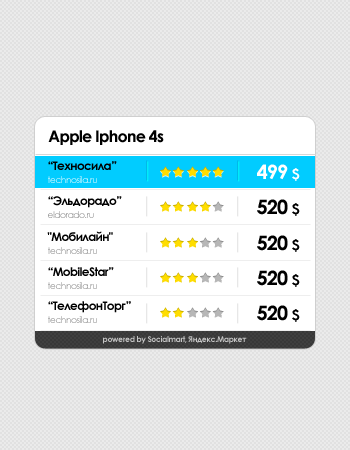
<style>
.page{position:relative;width:350px;height:450px;background:#e1e1e1}
.page>*{position:absolute;margin:0}
.t1{font:16px "CenturyGothic-Bold";letter-spacing:-0.05em;color:#000000}
.t2{font:12px "CenturyGothic-Bold";letter-spacing:-0.05em;color:#000000}
.t3{font:20px "CenturyGothic-Bold";letter-spacing:-0.05em;color:#ffffff}
.t4{font:14px "CenturyGothic-Bold";letter-spacing:-0.05em;color:#ffffff}
.t5{font:9px "CenturyGothic";letter-spacing:-0.05em}
.t6{font:20px "CenturyGothic-Bold";letter-spacing:-0.05em;color:#000000}
.t7{font:14px "CenturyGothic-Bold";letter-spacing:-0.05em;color:#000000}
.t8{font:8px "CenturyGothic-Bold";letter-spacing:-0.05em;color:#c5c5c5}
</style>
<div class="page">
<p class="t1" style="left:48px;top:130px;width:116px;height:15px">Apple Iphone 4s</p>
<p class="t2" style="left:48px;top:161px;width:69px;height:9px">“Техносила”</p>
<p class="t3" style="left:257px;top:164px;width:43px;height:17px">499 <span class="t4">$</span></p>
<p class="t5" style="left:48px;top:176px;width:49px;height:7px">technosila.ru</p>
<p class="t2" style="left:48px;top:196px;width:74px;height:12px">“Эльдорадо”</p>
<p class="t6" style="left:257px;top:199px;width:43px;height:17px">520 <span class="t7">$</span></p>
<p class="t5" style="left:48px;top:211px;width:46px;height:7px">eldorado.ru</p>
<p class="t2" style="left:47px;top:231px;width:66px;height:10px">"Мобилайн"</p>
<p class="t6" style="left:257px;top:235px;width:43px;height:17px">520 <span class="t7">$</span></p>
<p class="t5" style="left:48px;top:247px;width:49px;height:7px">technosila.ru</p>
<p class="t2" style="left:48px;top:267px;width:66px;height:10px">“MobileStar”</p>
<p class="t6" style="left:257px;top:270px;width:43px;height:17px">520 <span class="t7">$</span></p>
<p class="t5" style="left:48px;top:282px;width:49px;height:7px">technosila.ru</p>
<p class="t2" style="left:48px;top:301px;width:83px;height:12px">“ТелефонТорг”</p>
<p class="t6" style="left:257px;top:305px;width:43px;height:17px">520 <span class="t7">$</span></p>
<p class="t5" style="left:48px;top:316px;width:49px;height:7px">technosila.ru</p>
<p class="t8" style="left:103px;top:336px;width:144px;height:8px">powered by Socialmart, Яндекс.Маркет</p>
</div>
